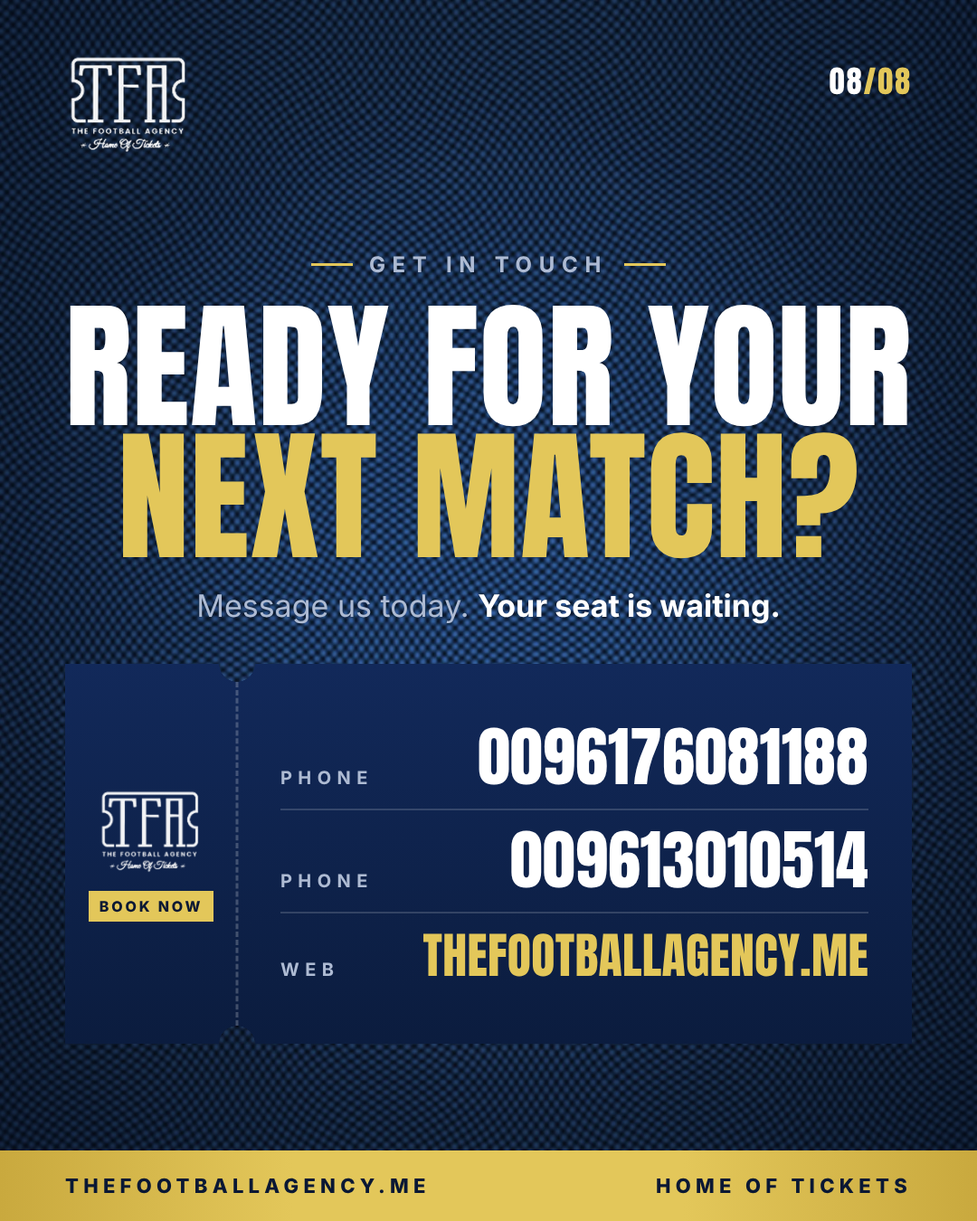
<style>
.page{position:relative;width:977px;height:1221px}
.page>*{position:absolute;margin:0}
.t1{font:30.7px "Anton-Regular";letter-spacing:0.06em;color:#e3c75a}
.t2{font:30.7px "Anton-Regular";letter-spacing:0.06em;color:#ffffff}
.t3{font:21.7px "Inter-Bold";letter-spacing:0.32em;color:#aebbd3}
.t4{font:138.8px "Anton-Regular";letter-spacing:0.005em;color:#ffffff}
.t5{font:143.8px "Anton-Regular";letter-spacing:0.005em;color:#e3c75a}
.t6{font:30.7px "Inter-Bold";color:#ffffff}
.t7{font:30.7px "Inter-Regular";color:#aebbd3}
.t8{font:65.1px "Anton-Regular";letter-spacing:0.005em;color:#ffffff}
.t9{font:18.1px "Inter-Bold";letter-spacing:0.32em;color:#aebbd3}
.t10{font:14.5px "Inter-ExtraBold";letter-spacing:0.18em;color:#0a1834}
.t11{font:48.8px "Anton-Regular";letter-spacing:0.005em;color:#e3c75a}
.t12{font:19.9px "Inter-ExtraBold";letter-spacing:0.24em;color:#0a1834}
</style>
<div class="page">
<p class="t1" style="left:829px;top:67px;width:81px;height:28px"><span class="t2">08</span>/08</p>
<p class="t3" style="left:370px;top:256px;width:230px;height:17px">GET IN TOUCH</p>
<p class="t4" style="left:70px;top:305px;width:839px;height:122px">READY FOR YOUR</p>
<p class="t5" style="left:123px;top:432px;width:733px;height:127px">NEXT MATCH?</p>
<p class="t6" style="left:199px;top:593px;width:580px;height:31px"><span class="t7">Message us today. </span>Your seat is waiting.</p>
<p class="t8" style="left:478px;top:727px;width:388px;height:58px">0096176081188</p>
<p class="t9" style="left:281px;top:771px;width:86px;height:14px">PHONE</p>
<p class="t8" style="left:511px;top:830px;width:356px;height:58px">009613010514</p>
<p class="t9" style="left:281px;top:874px;width:86px;height:14px">PHONE</p>
<p class="t10" style="left:99px;top:901px;width:102px;height:11px">BOOK NOW</p>
<p class="t11" style="left:423px;top:933px;width:444px;height:44px">THEFOOTBALLAGENCY.ME</p>
<p class="t9" style="left:280px;top:962px;width:54px;height:14px">WEB</p>
<p class="t12" style="left:65px;top:1177px;width:360px;height:17px">THEFOOTBALLAGENCY.ME</p>
<p class="t12" style="left:657px;top:1177px;width:249px;height:17px">HOME OF TICKETS</p>
</div>
